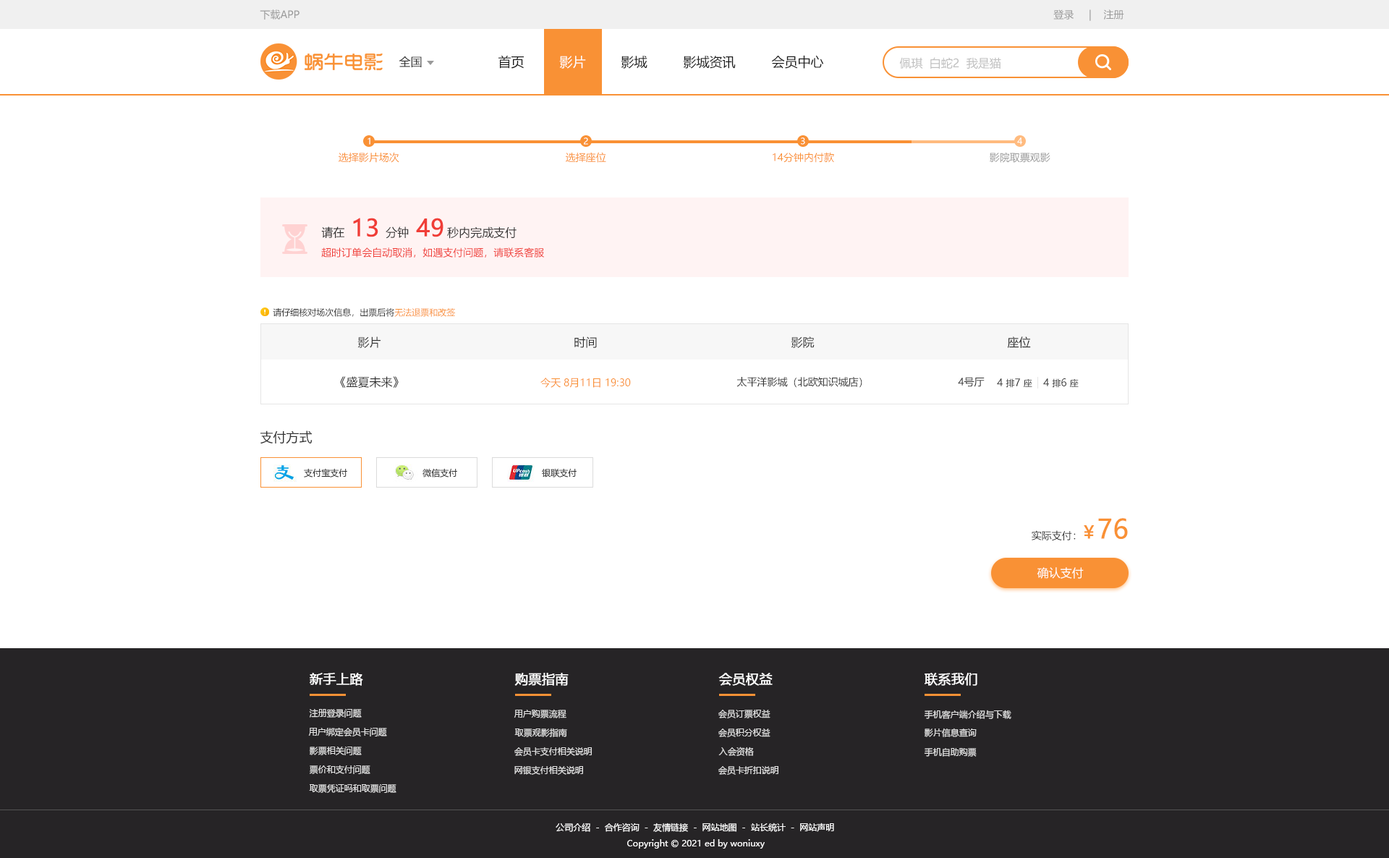
<style>
.page{position:relative;width:1389px;height:858px;background:#ffffff}
.page>*{position:absolute;margin:0}
.t1{font:10.1px "MicrosoftYaHei";color:#9a9a9a;text-transform:uppercase}
.t2{font:11.6px "MicrosoftYaHei";color:#313131;text-transform:uppercase}
.t3{font:13px "MicrosoftYaHei";color:#1b1b1b;text-transform:uppercase}
.t4{font:13px "MicrosoftYaHei";color:#ffffff;text-transform:uppercase}
.t5{font:11.6px "MicrosoftYaHei";color:#bfbfbf;text-transform:uppercase}
.t6{font:8.7px "MicrosoftYaHei";color:#fefefe}
.t7{font:10.1px "MicrosoftYaHei";color:#f99135}
.t8{font:10.1px "MicrosoftYaHei";color:#999999}
.t9{font:23.2px "MicrosoftYaHei";color:#f03d37;font-weight:bold}
.t10{font:11.6px "MicrosoftYaHei";color:#333333}
.t11{font:10.1px "MicrosoftYaHei";color:#f03d37}
.t12{font:8.7px "MicrosoftYaHei";color:#333333}
.t13{font:8.7px "MicrosoftYaHei";color:#f99135}
.t14{font:10.1px "MicrosoftYaHei";color:#333333}
.t15{font:13px "MicrosoftYaHei";color:#333333}
.t16{font:26.1px "MicrosoftYaHei";color:#f99135;font-weight:bold}
.t17{font:17.4px "MicrosoftYaHei";color:#f99135;font-weight:bold}
.t18{font:11.6px "MicrosoftYaHei";color:#ffffff}
.t19{font:13px "MicrosoftYaHei";color:#ffffff;font-weight:bold}
.t20{font:8.7px "MicrosoftYaHei";color:#e2e2e2}
.t21{font:8.7px "MicrosoftYaHei";color:#ffffff}
</style>
<div class="page">
<p class="t1" style="left:260px;top:9px;width:40px;height:11px">下载APP</p>
<p class="t1" style="left:1054px;top:9px;width:71px;height:12px">登录     |    注册</p>
<p class="t2" style="left:399px;top:56px;width:23px;height:11px">全国</p>
<p class="t3" style="left:499px;top:55px;width:25px;height:14px">首页</p>
<p class="t4" style="left:559px;top:56px;width:27px;height:13px">影片</p>
<p class="t3" style="left:621px;top:56px;width:27px;height:13px">影城</p>
<p class="t3" style="left:683px;top:56px;width:53px;height:13px">影城资讯</p>
<p class="t3" style="left:771px;top:55px;width:53px;height:14px">会员中心</p>
<p class="t5" style="left:899px;top:57px;width:103px;height:12px">佩琪  白蛇2  我是猫</p>
<p class="t6" style="left:368px;top:137px;width:3px;height:8px">1</p>
<p class="t6" style="left:584px;top:137px;width:4px;height:8px">2</p>
<p class="t6" style="left:801px;top:137px;width:4px;height:8px">3</p>
<p class="t6" style="left:1017px;top:137px;width:6px;height:8px">4</p>
<p class="t7" style="left:339px;top:152px;width:60px;height:11px">选择影片场次</p>
<p class="t7" style="left:566px;top:152px;width:40px;height:11px">选择座位</p>
<p class="t7" style="left:773px;top:152px;width:61px;height:11px">14分钟内付款</p>
<p class="t8" style="left:990px;top:152px;width:61px;height:11px">影院取票观影</p>
<p class="t9" style="left:353px;top:218px;width:25px;height:19px">13</p>
<p class="t9" style="left:416px;top:218px;width:28px;height:19px">49</p>
<p class="t10" style="left:321px;top:227px;width:23px;height:11px">请在</p>
<p class="t10" style="left:386px;top:227px;width:23px;height:12px">分钟</p>
<p class="t10" style="left:447px;top:227px;width:70px;height:12px">秒内完成支付</p>
<p class="t11" style="left:321px;top:247px;width:224px;height:11px">超时订单会自动取消，如遇支付问题，请联系客服</p>
<p class="t12" style="left:273px;top:308px;width:183px;height:9px">请仔细核对场次信息，出票后将<span class="t13">无法退票和改签</span></p>
<p class="t10" style="left:357px;top:336px;width:24px;height:12px">影片</p>
<p class="t10" style="left:575px;top:336px;width:22px;height:12px">时间</p>
<p class="t10" style="left:791px;top:336px;width:24px;height:12px">影院</p>
<p class="t10" style="left:1007px;top:336px;width:24px;height:12px">座位</p>
<p class="t10" style="left:340px;top:376px;width:59px;height:12px">《盛夏未来》</p>
<p class="t7" style="left:541px;top:378px;width:90px;height:10px">今天 8月11日 19:30</p>
<p class="t14" style="left:737px;top:377px;width:126px;height:11px">太平洋影城（北欧知识城店）</p>
<p class="t14" style="left:958px;top:377px;width:27px;height:10px">4号厅</p>
<p class="t14" style="left:997px;top:378px;width:36px;height:10px">4 <span class="t12">排</span>7 <span class="t12">座</span></p>
<p class="t14" style="left:1043px;top:378px;width:36px;height:10px">4 <span class="t12">排</span>6 <span class="t12">座</span></p>
<p class="t15" style="left:261px;top:431px;width:52px;height:13px">支付方式</p>
<p class="t12" style="left:304px;top:468px;width:43px;height:10px">支付宝支付</p>
<p class="t12" style="left:423px;top:468px;width:34px;height:10px">微信支付</p>
<p class="t12" style="left:542px;top:468px;width:35px;height:10px">银联支付</p>
<p class="t16" style="left:1098px;top:518px;width:30px;height:21px">76</p>
<p class="t14" style="left:1032px;top:530px;width:44px;height:11px">实际支付：</p>
<p class="t17" style="left:1084px;top:525px;width:11px;height:14px">￥</p>
<p class="t18" style="left:1037px;top:567px;width:47px;height:12px">确认支付</p>
<p class="t19" style="left:310px;top:673px;width:53px;height:13px">新手上路</p>
<p class="t19" style="left:515px;top:673px;width:54px;height:13px">购票指南</p>
<p class="t19" style="left:719px;top:673px;width:54px;height:13px">会员权益</p>
<p class="t19" style="left:925px;top:673px;width:53px;height:13px">联系我们</p>
<p class="t20" style="left:309px;top:709px;width:53px;height:9px">注册登录问题</p>
<p class="t20" style="left:514px;top:709px;width:53px;height:10px">用户购票流程</p>
<p class="t20" style="left:719px;top:710px;width:52px;height:9px">会员订票权益</p>
<p class="t20" style="left:924px;top:710px;width:88px;height:9px">手机客户端介绍与下载</p>
<p class="t20" style="left:308px;top:728px;width:79px;height:9px">用户绑定会员卡问题</p>
<p class="t20" style="left:515px;top:728px;width:52px;height:9px">取票观影指南</p>
<p class="t20" style="left:719px;top:729px;width:52px;height:8px">会员积分权益</p>
<p class="t20" style="left:924px;top:728px;width:53px;height:9px">影片信息查询</p>
<p class="t20" style="left:309px;top:747px;width:53px;height:8px">影票相关问题</p>
<p class="t20" style="left:515px;top:747px;width:77px;height:9px">会员卡支付相关说明</p>
<p class="t20" style="left:719px;top:747px;width:35px;height:9px">入会资格</p>
<p class="t20" style="left:924px;top:748px;width:53px;height:9px">手机自助购票</p>
<p class="t20" style="left:310px;top:765px;width:61px;height:9px">票价和支付问题</p>
<p class="t20" style="left:515px;top:766px;width:68px;height:9px">网银支付相关说明</p>
<p class="t20" style="left:719px;top:766px;width:60px;height:9px">会员卡折扣说明</p>
<p class="t20" style="left:309px;top:784px;width:88px;height:9px">取票凭证吗和取票问题</p>
<p class="t21" style="left:556px;top:823px;width:278px;height:9px">公司介绍  -  合作咨询  -  友情链接  -  网站地图  -  站长统计  -  网站声明</p>
<p class="t21" style="left:627px;top:839px;width:138px;height:10px">Copyright © 2021 ed by woniuxy</p>
</div>
